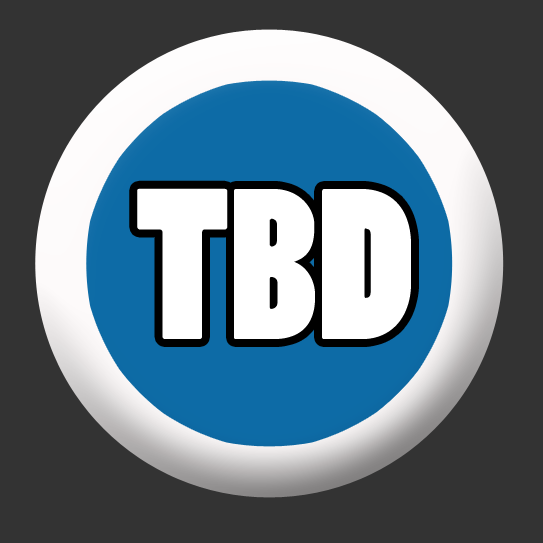
<style>
.page{position:relative;width:543px;height:543px;background:#333333}
.page>*{position:absolute;margin:0}
.t1{font:200px "PoplarStd";color:#ffffff}
</style>
<div class="page">
<p class="t1" style="left:137px;top:188px;width:274px;height:151px">TBD</p>
</div>
